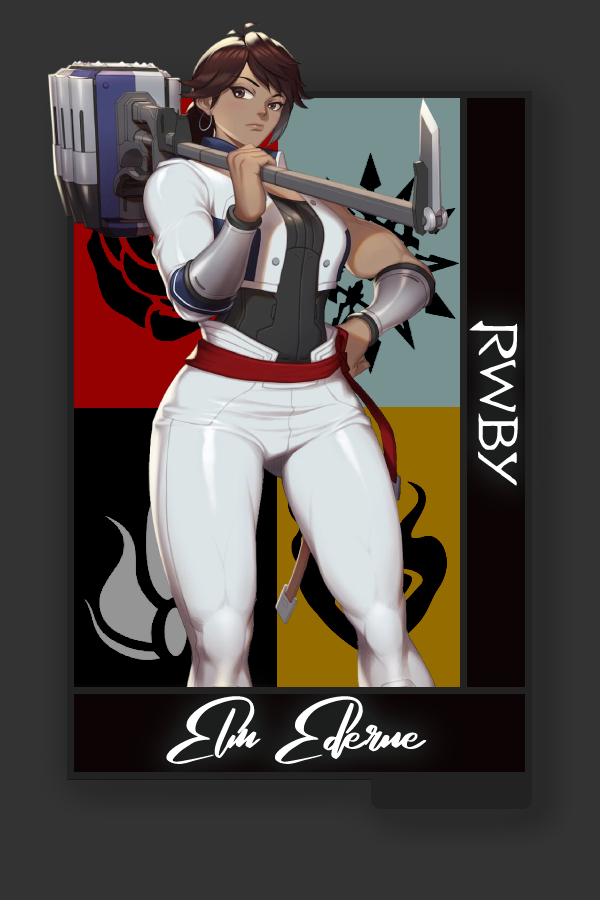
<style>
.page{position:relative;width:600px;height:900px;background:#333333}
.page>*{position:absolute;margin:0}
.t1{font:61.3px "RWBY_Style";color:#ffffff;scale:1.25 1}
.t2{font:75px "RosegaFREE";color:#ffffff}
</style>
<div class="page">
<p class="t1" style="left:469px;top:320px;width:49px;height:166px;rotate:90deg">RWBY</p>
<p class="t2" style="left:166px;top:688px;width:261px;height:77px">Elm Ederne</p>
</div>
